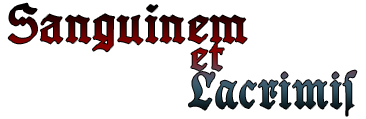
<style>
.page{position:relative;width:366px;height:119px;background:#ffffff}
.page>*{position:absolute;margin:0}
.t1{font:48px "GotenborgFraktur"}
.t2{font:39.3px "GotenborgFraktur"}
.t3{font:50px "GoeschenFraktur";letter-spacing:0.02em}
</style>
<div class="page">
<p class="t1" style="left:8px;top:3px;width:239px;height:49px">Sanguinem</p>
<p class="t2" style="left:191px;top:42px;width:33px;height:29px">et</p>
<p class="t3" style="left:189px;top:70px;width:168px;height:46px">Lacrimis</p>
</div>
